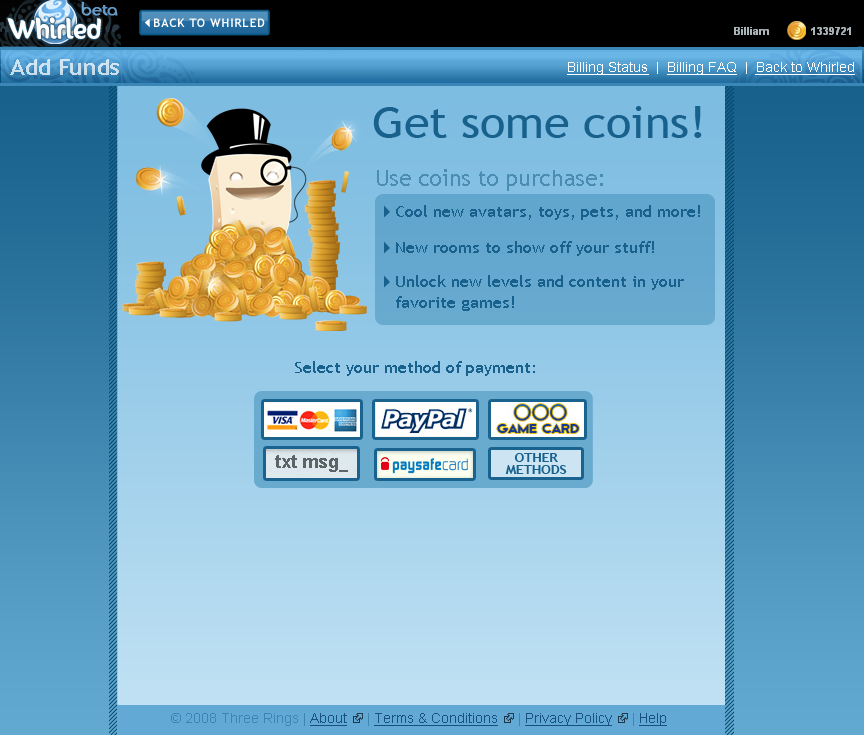
<style>
.page{position:relative;width:864px;height:735px}
.page>*{position:absolute;margin:0}
.t1{font:11.6px "TrebuchetMS-Bold";letter-spacing:0.075em;color:#ffffff}
.t2{font:21.8px "TrebuchetMS-Bold";color:#cce1ef;scale:1.07 1}
.t3{font:12.7px "ArialMT";color:#ffffff;text-decoration:underline;scale:1.07 1}
.t4{font:12.7px "ArialMT";color:#ffffff;scale:1.07 1}
.t5{font:43.7px "TrebuchetMS";color:#18618d;scale:1.07 1}
.t6{font:21.8px "TrebuchetMS";color:#4a8bb1;scale:1.07 1}
.t7{font:16.4px/12px "TrebuchetMS";color:#18618d;scale:1.07 1}
.t8{font:16.4px "TrebuchetMS";color:#18618d;scale:1.07 1}
</style>
<div class="page">
<p class="t1" style="left:154px;top:18px;width:111px;height:9px">BACK TO WHIRLED</p>
<p class="t2" style="left:10px;top:59px;width:109px;height:16px">Add Funds</p>
<p class="t3" style="left:567px;top:62px;width:288px;height:13px">Billing Status<span class="t4">  |  </span>Billing FAQ<span class="t4">  |  </span>Back to Whirled</p>
<p class="t5" style="left:373px;top:106px;width:329px;height:32px">Get some coins!</p>
<p class="t6" style="left:377px;top:169px;width:226px;height:22px">Use coins to purchase:</p>
<p class="t7" style="left:396px;top:205px;width:304px;height:106px">Cool new avatars, toys, pets, and more!<br><br><br>New rooms to show off your stuff!<br><br>Unlock new <span class="t8">levels and content in your <br>favorite games!</span></p>
<p class="t8" style="left:295px;top:361px;width:240px;height:15px">Select your method of payment:</p>
</div>
